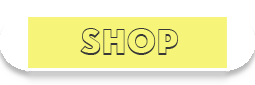
<style>
.page{position:relative;width:255px;height:85px;background:#f6f57a}
.page>*{position:absolute;margin:0}
.t1{font:35.6px "a_PlakatTitul3D-ExtraBold";color:#383838}
</style>
<div class="page">
<p class="t1" style="left:80px;top:28px;width:98px;height:27px">Shop</p>
</div>
